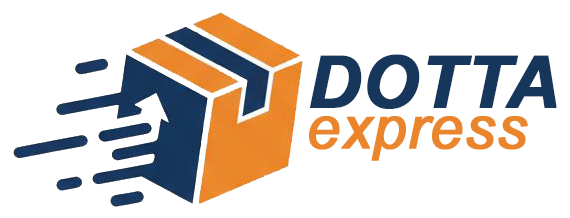
<style>
.page{position:relative;width:570px;height:218px;background:#ffffff}
.page>*{position:absolute;margin:0}
.t1{font:72px "Arial-BoldItalicMT";color:#16365c;font-weight:bold}
.t2{font:60px "Arial-ItalicMT";color:#ea852d;font-weight:bold}
</style>
<div class="page">
<p class="t1" style="left:310px;top:54px;width:247px;height:55px">DOTTA</p>
<p class="t2" style="left:309px;top:116px;width:219px;height:45px">express</p>
</div>
